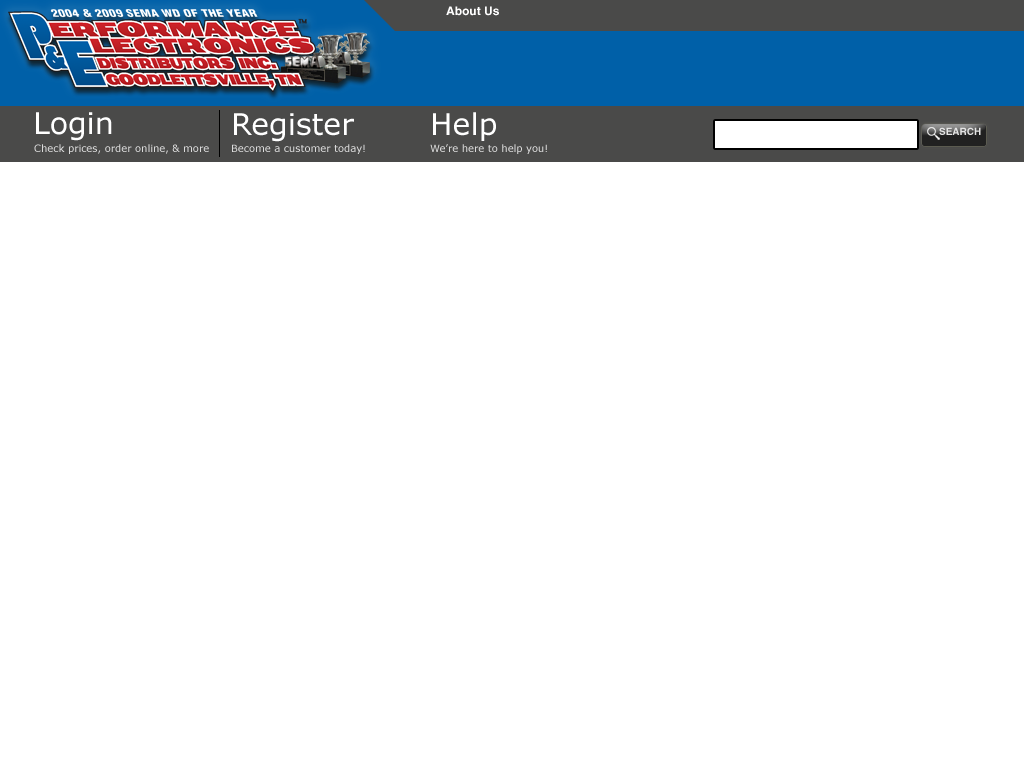
<style>
.page{position:relative;width:1024px;height:768px;background:#ffffff}
.page>*{position:absolute;margin:0}
.t1{font:12px "HelveticaLTStd-Bold";color:#ffffff}
.t2{font:30px "Verdana";color:#ffffff}
.t3{font:10px "HelveticaLTStd-Bold";color:#e4e4e4}
.t4{font:10px "Verdana";color:#dbdbdb}
</style>
<div class="page">
<p class="t1" style="left:446px;top:6px;width:53px;height:10px">About Us</p>
<p class="t2" style="left:36px;top:112px;width:76px;height:29px">Login</p>
<p class="t2" style="left:234px;top:113px;width:120px;height:29px">Register</p>
<p class="t2" style="left:433px;top:112px;width:63px;height:29px">Help</p>
<p class="t3" style="left:939px;top:127px;width:42px;height:8px">SEARCH</p>
<p class="t4" style="left:34px;top:144px;width:175px;height:10px">Check prices, order online, &amp; more</p>
<p class="t4" style="left:232px;top:144px;width:133px;height:10px">Become a customer today!</p>
<p class="t4" style="left:430px;top:144px;width:117px;height:10px">We’re here to help you!</p>
</div>
